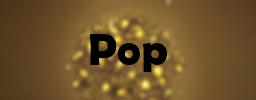
<style>
.page{position:relative;width:256px;height:100px}
.page>*{position:absolute;margin:0}
.t1{font:45px "BerlinSansFBDemi-Bold";color:#000000}
.t2{font:16px "BerlinSansFBDemi-Bold";color:#000000}
</style>
<div class="page">
<p class="t1" style="left:89px;top:34px;width:78px;height:38px"><span class="t2"><br></span>Pop</p>
</div>
